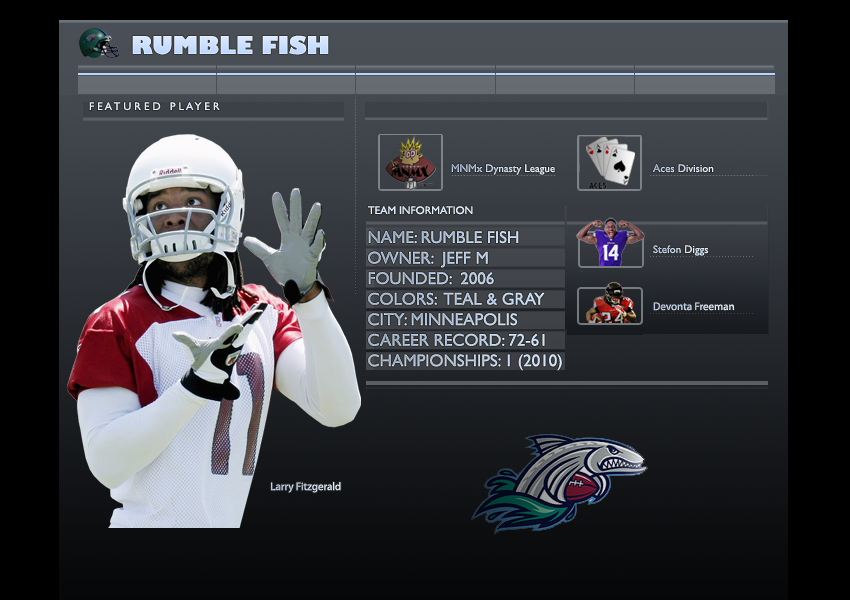
<style>
.page{position:relative;width:850px;height:600px}
.page>*{position:absolute;margin:0}
.t1{font:24px "GillSans-UltraBold";color:#d0e3ff}
.t2{font:11px "GillSansMT";color:#dfefff}
.t3{font:11px "GillSansMT"}
.t4{font:11px "GillSansMT";color:#deeeff}
.t5{font:17.1px "GillSansMT";color:#b7cae1}
.t6{font:11px "GillSansMT";color:#d0e2f4}
.t7{font:11px "MyriadPro-Regular"}
</style>
<div class="page">
<p class="t1" style="left:132px;top:35px;width:197px;height:20px">RUMBLE FISH</p>
<p class="t2" style="left:89px;top:102px;width:131px;height:9px">F E A T U R E D   P L A Y E R</p>
<p class="t3" style="left:451px;top:164px;width:104px;height:11px">MNMx Dynasty League</p>
<p class="t3" style="left:653px;top:164px;width:61px;height:9px">Aces Division</p>
<p class="t4" style="left:368px;top:206px;width:105px;height:9px">TEAM INFORMATION</p>
<p class="t5" style="left:368px;top:231px;width:194px;height:140px">NAME: RUMBLE FISH<br>OWNER:  JEFF M<br>FOUNDED:  2006<br>COLORS:  TEAL &amp; GRAY<br>CITY: MINNEAPOLIS<br>CAREER RECORD: 72-61<br>CHAMPIONSHIPS: 1 (2010)</p>
<p class="t6" style="left:653px;top:245px;width:56px;height:11px">Stefon Diggs</p>
<p class="t7" style="left:653px;top:302px;width:81px;height:9px">Devonta Freeman</p>
<p class="t7" style="left:271px;top:482px;width:70px;height:11px">Larry Fitzgerald</p>
</div>
